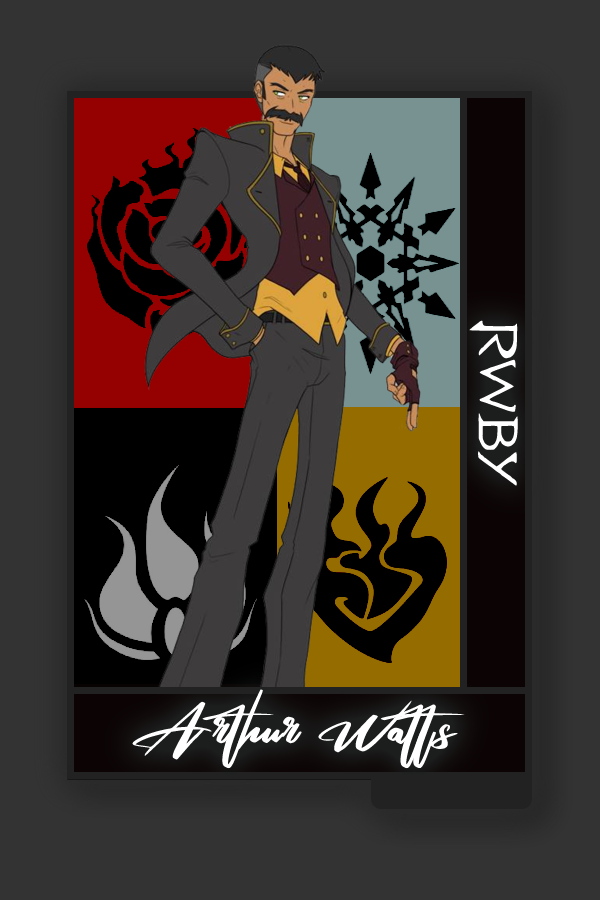
<style>
.page{position:relative;width:600px;height:900px;background:#333333}
.page>*{position:absolute;margin:0}
.t1{font:61.3px "RWBY_Style";color:#ffffff;scale:1.25 1}
.t2{font:75px "RosegaFREE";color:#ffffff}
</style>
<div class="page">
<p class="t1" style="left:469px;top:320px;width:49px;height:166px;rotate:90deg">RWBY</p>
<p class="t2" style="left:132px;top:689px;width:334px;height:80px">Arthur Watts</p>
</div>
